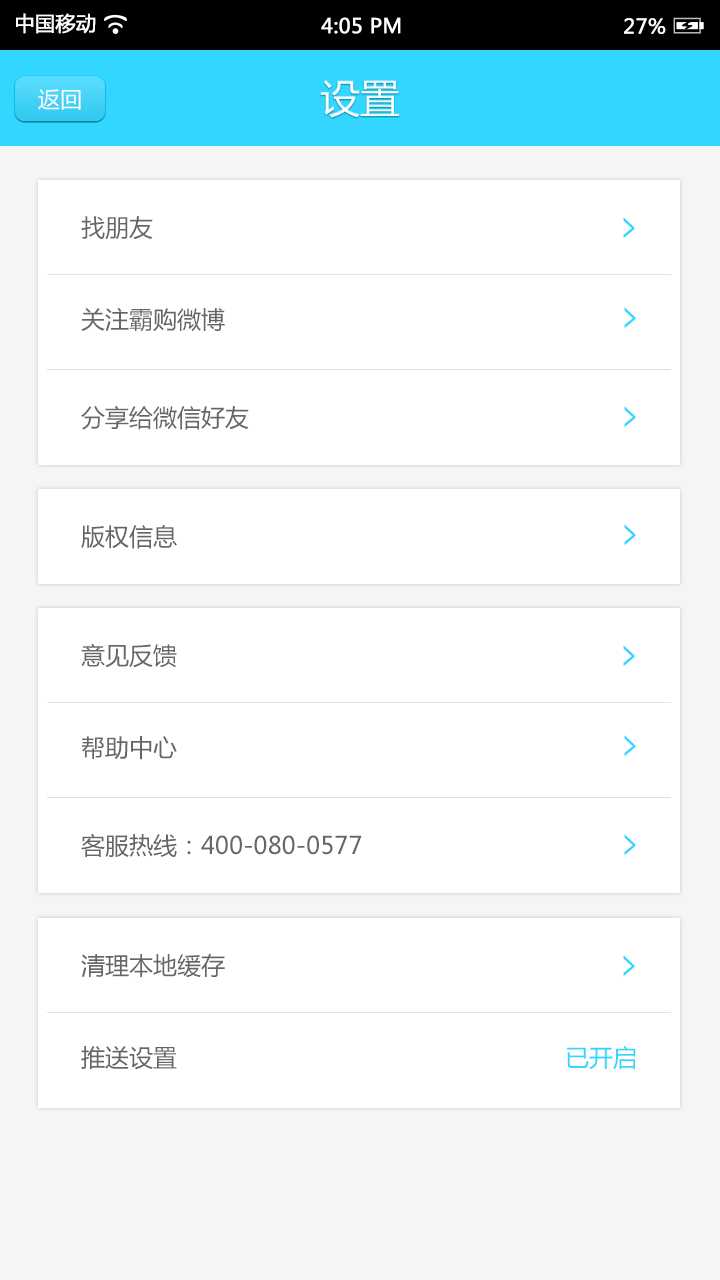
<style>
.page{position:relative;width:720px;height:1280px;background:#ffffff}
.page>*{position:absolute;margin:0}
.t1{font:20px "MicrosoftYaHei";color:#fffcfc;font-weight:bold}
.t2{font:20px "MicrosoftYaHei";color:#ffffff;font-weight:bold}
.t3{font:20px "MicrosoftYaHei";color:#fffefe;font-weight:bold}
.t4{font:22px "MicrosoftYaHei";color:#ffffff}
.t5{font:40px "MicrosoftYaHei";color:#ffffff}
.t6{font:24px "MicrosoftYaHei";color:#666666}
.t7{font:40.4px "MicrosoftYaHei";color:#33d6ff;scale:0.6 1}
.t8{font:24px "MicrosoftYaHei";color:#33d6ff}
</style>
<div class="page">
<p class="t1" style="left:16px;top:13px;width:80px;height:21px">中国移动</p>
<p class="t2" style="left:321px;top:17px;width:80px;height:17px">4:05 PM</p>
<p class="t3" style="left:624px;top:18px;width:42px;height:16px">27%</p>
<p class="t4" style="left:38px;top:89px;width:43px;height:21px">返回</p>
<p class="t5" style="left:320px;top:80px;width:80px;height:38px">设置</p>
<p class="t6" style="left:81px;top:216px;width:72px;height:24px">找朋友</p>
<p class="t7" style="left:623px;top:217px;width:12px;height:22px">&gt;</p>
<p class="t6" style="left:81px;top:307px;width:144px;height:25px">关注霸购微博</p>
<p class="t7" style="left:624px;top:307px;width:12px;height:22px">&gt;</p>
<p class="t6" style="left:81px;top:405px;width:168px;height:25px">分享给微信好友</p>
<p class="t7" style="left:624px;top:406px;width:12px;height:22px">&gt;</p>
<p class="t6" style="left:81px;top:524px;width:96px;height:25px">版权信息</p>
<p class="t7" style="left:624px;top:524px;width:12px;height:22px">&gt;</p>
<p class="t6" style="left:81px;top:643px;width:96px;height:25px">意见反馈</p>
<p class="t7" style="left:623px;top:645px;width:12px;height:22px">&gt;</p>
<p class="t6" style="left:81px;top:736px;width:96px;height:24px">帮助中心</p>
<p class="t7" style="left:624px;top:735px;width:12px;height:22px">&gt;</p>
<p class="t6" style="left:81px;top:833px;width:281px;height:24px">客服热线：400-080-0577</p>
<p class="t7" style="left:624px;top:834px;width:12px;height:22px">&gt;</p>
<p class="t6" style="left:81px;top:953px;width:144px;height:25px">清理本地缓存</p>
<p class="t7" style="left:623px;top:955px;width:12px;height:22px">&gt;</p>
<p class="t6" style="left:81px;top:1046px;width:96px;height:24px">推送设置</p>
<p class="t8" style="left:567px;top:1045px;width:69px;height:25px">已开启</p>
</div>
